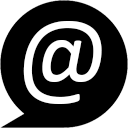
<style>
.page{position:relative;width:128px;height:128px;background:#000000}
.page>*{position:absolute;margin:0}
.t1{font:106.6px "Calibri";color:#ffffff}
</style>
<div class="page">
<p class="t1" style="left:23px;top:21px;width:79px;height:83px">@</p>
</div>
